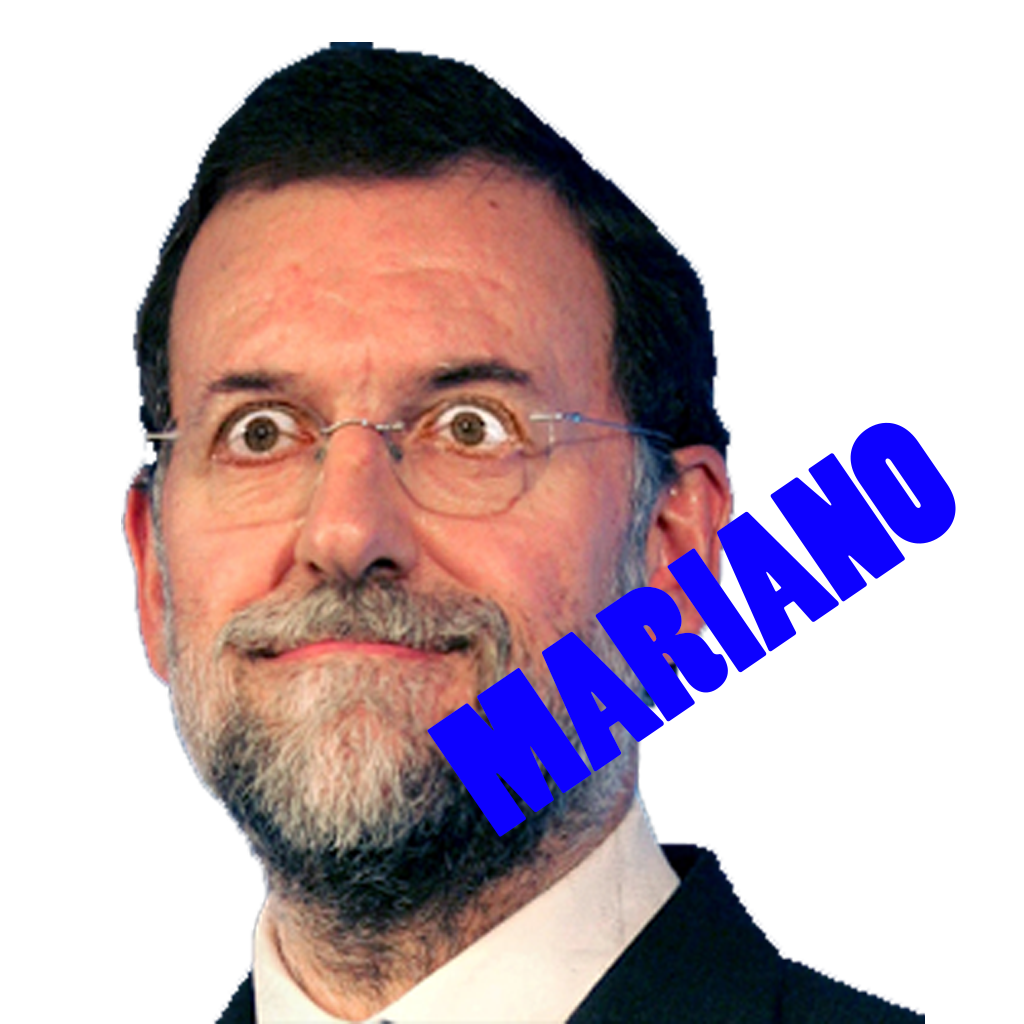
<style>
.page{position:relative;width:1024px;height:1024px;background:#ffffff}
.page>*{position:absolute;margin:0}
.t1{font:172.3px "PoplarStd";color:#0d01ff}
</style>
<div class="page">
<p class="t1" style="left:427px;top:422px;width:529px;height:415px;rotate:-34deg">MARIANO</p>
</div>
